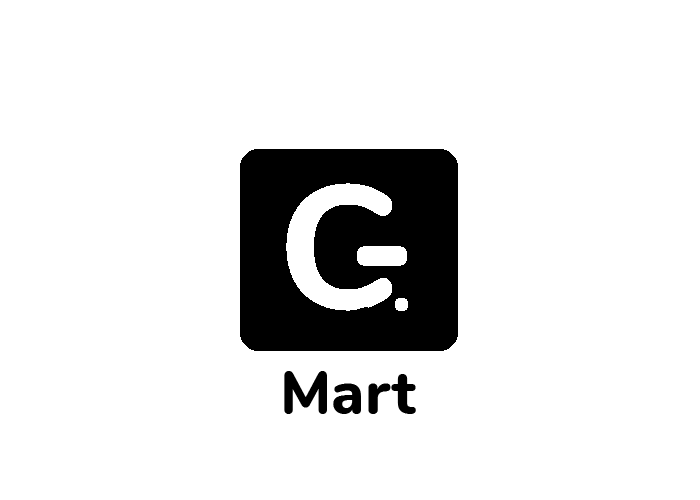
<style>
.page{position:relative;width:700px;height:500px;background:#ffffff}
.page>*{position:absolute;margin:0}
.t1{font:61px "Nunito-ExtraBold";color:#000000}
</style>
<div class="page">
<p class="t1" style="left:284px;top:371px;width:132px;height:43px">Mart</p>
</div>
